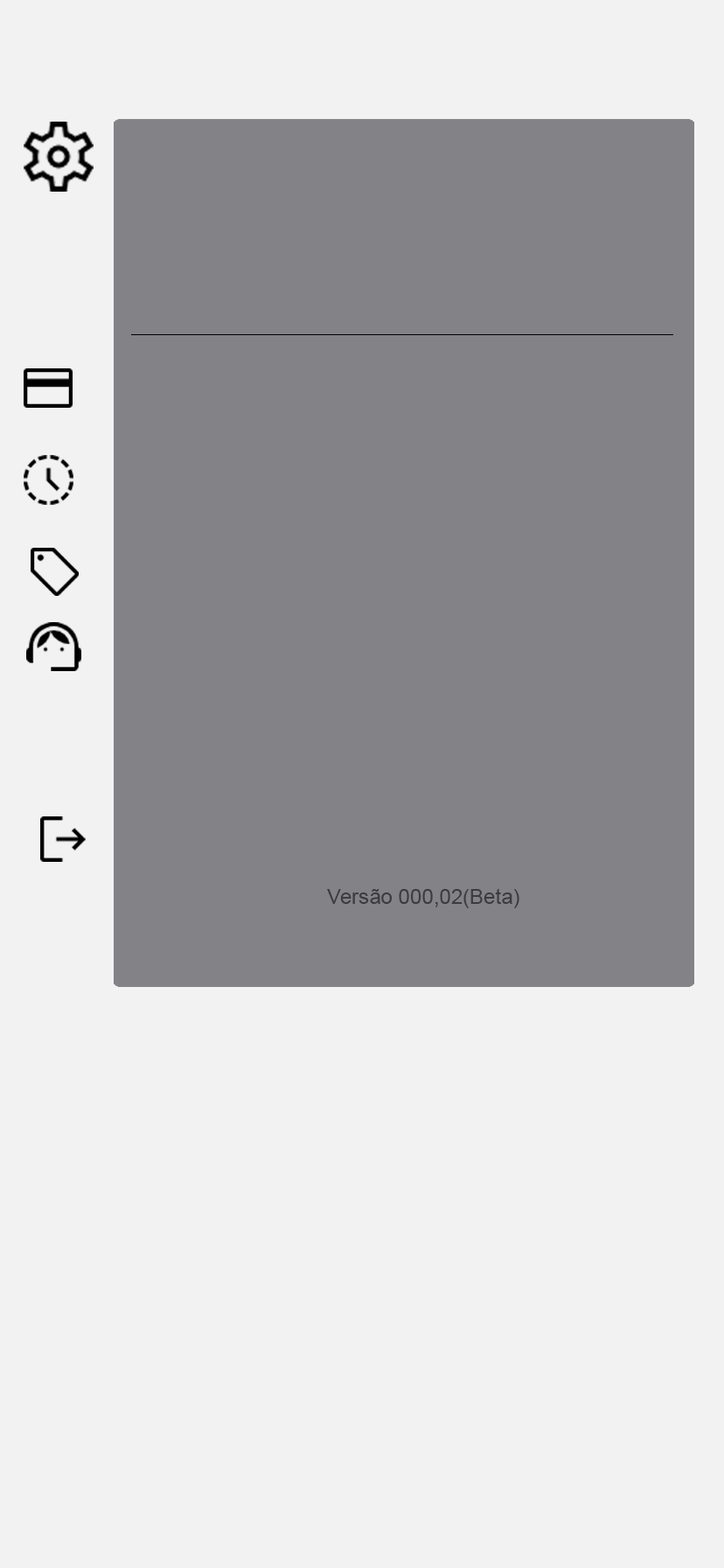
<style>
.page{position:relative;width:724px;height:1568px;background:#f2f2f2}
.page>*{position:absolute;margin:0}
.t1{font:21px "ArialMT";color:#3c3c3e}
</style>
<div class="page">
<p class="t1" style="left:327px;top:888px;width:193px;height:20px">Versão 000,02(Beta)</p>
</div>
